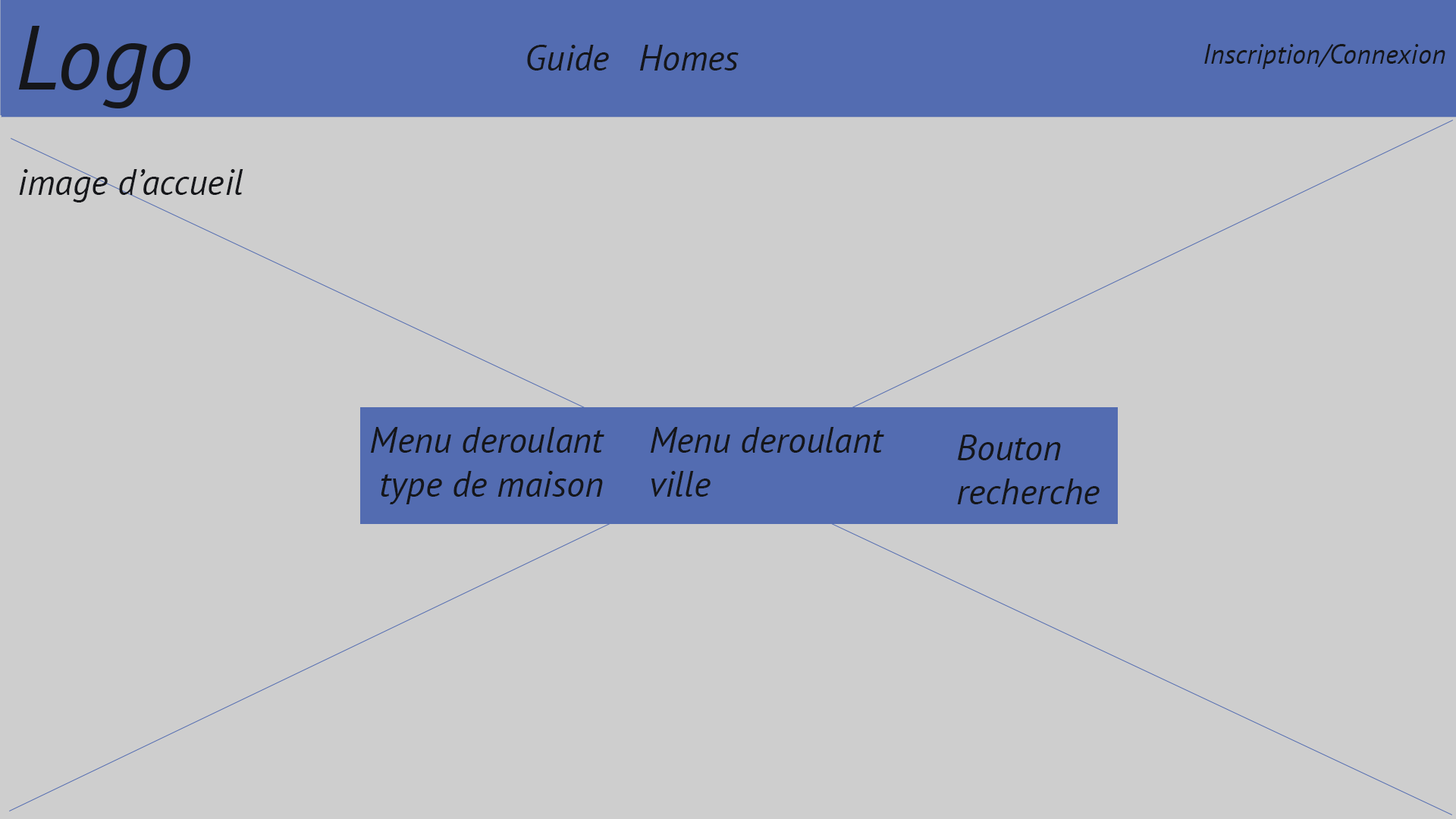
<style>
.page{position:relative;width:1456px;height:819px;background:#cecece}
.page>*{position:absolute;margin:0}
.t1{font:91px "PTSans-Italic";color:#15161a}
.t2{font:36.4px "PTSans-Italic";color:#15161a}
.t3{font:27.3px "PTSans-Italic";color:#15161a}
</style>
<div class="page">
<p class="t1" style="left:18px;top:26px;width:172px;height:82px">Logo</p>
<p class="t2" style="left:527px;top:45px;width:212px;height:26px">Guide   Homes</p>
<p class="t3" style="left:1204px;top:44px;width:241px;height:25px">Inscription/Connexion</p>
<p class="t2" style="left:19px;top:169px;width:224px;height:33px">image d’accueil</p>
<p class="t2" style="left:370px;top:427px;width:234px;height:77px">Menu deroulant<br> type de maison</p>
<p class="t2" style="left:650px;top:427px;width:234px;height:70px">Menu deroulant <br>ville</p>
<p class="t2" style="left:957px;top:435px;width:143px;height:69px">Bouton <br>recherche</p>
</div>
